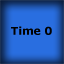
<style>
.page{position:relative;width:64px;height:64px;background:#296ee0}
.page>*{position:absolute;margin:0}
.t1{font:10.8px "Verdana-Bold";color:#000000}
</style>
<div class="page">
<p class="t1" style="left:11px;top:26px;width:41px;height:9px">Time 0</p>
</div>
